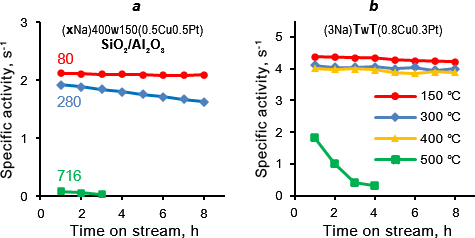
<style>
.page{position:relative;width:475px;height:238px;background:#ffffff}
.page>*{position:absolute;margin:0}
.t1{font:14.6px "Arial-BoldItalicMT";color:#000000}
.t2{font:12.5px "ArialUnicodeMS";color:#000000}
.t3{font:12.5px "ArialNarrow";letter-spacing:0.05em;color:#000000}
.t4{font:12.5px "Arial-BoldMT";letter-spacing:0.05em;color:#000000}
.t5{font:14.6px "ArialUnicodeMS";letter-spacing:0.05em;color:#000000}
.t6{font:14.6px "ArialUnicodeMS";color:#ff0000}
.t7{font:14.6px "ArialUnicodeMS";color:#4f81bd}
.t8{font:12.5px/21.5px "ArialUnicodeMS";letter-spacing:0.05em;color:#000000}
.t9{font:14.6px "ArialUnicodeMS";color:#00b050}
</style>
<div class="page">
<p class="t1" style="left:132px;top:3px;width:9px;height:8px">a</p>
<p class="t1" style="left:369px;top:0px;width:9px;height:11px">b</p>
<p class="t2" style="left:20px;top:18px;width:7px;height:9px">3</p>
<p class="t3" style="left:62px;top:25px;width:141px;height:28px;text-align:center">(<span class="t4">x</span>Na)400w150(0.5Cu0.5Pt)<br><span class="t4">SiO2/Al2O3</span></p>
<p class="t3" style="left:324px;top:24px;width:118px;height:13px">(3Na)<span class="t4">T</span>w<span class="t4">T</span>(0.8Cu0.3Pt)</p>
<p class="t5" style="left:255px;top:41px;width:15px;height:137px;rotate:-90deg">Specific activity, s-1</p>
<p class="t2" style="left:275px;top:32px;width:7px;height:9px">5</p>
<p class="t5" style="left:0px;top:42px;width:15px;height:137px;rotate:-90deg">Specific activity, s-1</p>
<p class="t6" style="left:58px;top:53px;width:15px;height:11px">80</p>
<p class="t2" style="left:275px;top:64px;width:7px;height:9px">4</p>
<p class="t2" style="left:20px;top:76px;width:7px;height:9px">2</p>
<p class="t7" style="left:57px;top:96px;width:24px;height:11px">280</p>
<p class="t2" style="left:275px;top:96px;width:7px;height:9px">3</p>
<p class="t8" style="left:420px;top:91px;width:41px;height:73px">150 ℃<br>300 ℃<br>400 ℃<br>500 ℃</p>
<p class="t2" style="left:21px;top:134px;width:5px;height:9px">1</p>
<p class="t2" style="left:275px;top:128px;width:7px;height:9px">2</p>
<p class="t2" style="left:276px;top:159px;width:5px;height:9px">1</p>
<p class="t9" style="left:57px;top:170px;width:24px;height:11px">716</p>
<p class="t2" style="left:20px;top:192px;width:7px;height:9px">0</p>
<p class="t2" style="left:275px;top:191px;width:7px;height:9px">0</p>
<p class="t2" style="left:37px;top:209px;width:7px;height:9px">0</p>
<p class="t2" style="left:78px;top:209px;width:7px;height:9px">2</p>
<p class="t2" style="left:118px;top:209px;width:7px;height:9px">4</p>
<p class="t2" style="left:159px;top:209px;width:7px;height:9px">6</p>
<p class="t2" style="left:200px;top:209px;width:7px;height:9px">8</p>
<p class="t2" style="left:290px;top:208px;width:7px;height:9px">0</p>
<p class="t2" style="left:330px;top:208px;width:7px;height:9px">2</p>
<p class="t2" style="left:370px;top:208px;width:7px;height:9px">4</p>
<p class="t2" style="left:411px;top:208px;width:7px;height:9px">6</p>
<p class="t2" style="left:452px;top:208px;width:7px;height:9px">8</p>
<p class="t5" style="left:70px;top:225px;width:128px;height:13px">Time on stream, h</p>
<p class="t5" style="left:323px;top:225px;width:128px;height:13px">Time on stream, h</p>
</div>
